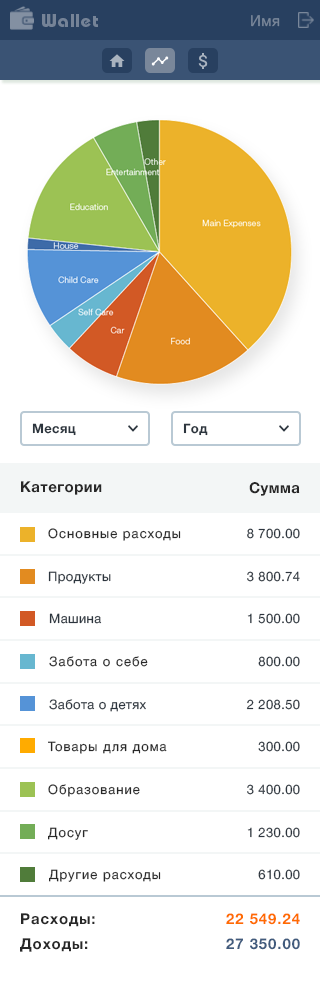
<style>
.page{position:relative;width:320px;height:986px;background:#ffffff}
.page>*{position:absolute;margin:0}
.t1{font:18px "BauhausC-Bold";letter-spacing:0.06em;color:#758397}
.t2{font:15px "HelveticaNeueCyr-Roman";letter-spacing:0.03em;color:#79879a}
.t3{font:13px "HelveticaNeueCyr-Bold";letter-spacing:0.03em;color:#2c353e}
.t4{font:15px "HelveticaNeueCyr-Bold";letter-spacing:0.03em;color:#282828}
.t5{font:13px "HelveticaNeueCyr-Roman";letter-spacing:0.08em;color:#282828}
.t6{font:13px "HelveticaNeueCyr-Roman";letter-spacing:0.03em;color:#2c353e}
.t7{font:15px "HelveticaNeueCyr-Bold";letter-spacing:0.06em;color:#282828}
.t8{font:15px "HelveticaNeueCyr-Bold";letter-spacing:0.06em;color:#ff6c00}
.t9{font:15px "HelveticaNeueCyr-Bold";letter-spacing:0.06em;color:#415b7d}
</style>
<div class="page">
<p class="t1" style="left:42px;top:14px;width:56px;height:13px">Wallet</p>
<p class="t2" style="left:251px;top:15px;width:29px;height:12px">Имя</p>
<p class="t3" style="left:32px;top:423px;width:44px;height:13px">Месяц</p>
<p class="t3" style="left:183px;top:423px;width:25px;height:13px">Год</p>
<p class="t4" style="left:21px;top:481px;width:81px;height:14px">Категории</p>
<p class="t4" style="left:249px;top:482px;width:51px;height:14px">Сумма</p>
<p class="t5" style="left:48px;top:528px;width:133px;height:13px">Основные расходы</p>
<p class="t6" style="left:247px;top:528px;width:53px;height:11px">8 700.00</p>
<p class="t6" style="left:48px;top:571px;width:63px;height:13px">Продукты</p>
<p class="t6" style="left:247px;top:571px;width:53px;height:11px">3 800.74</p>
<p class="t6" style="left:49px;top:613px;width:53px;height:11px">Машина</p>
<p class="t6" style="left:247px;top:613px;width:53px;height:11px">1 500.00</p>
<p class="t5" style="left:49px;top:656px;width:99px;height:11px">Забота о себе</p>
<p class="t6" style="left:258px;top:656px;width:42px;height:11px">800.00</p>
<p class="t6" style="left:49px;top:699px;width:97px;height:13px">Забота о детях</p>
<p class="t6" style="left:246px;top:699px;width:54px;height:11px">2 208.50</p>
<p class="t5" style="left:48px;top:741px;width:119px;height:13px">Товары для дома</p>
<p class="t6" style="left:258px;top:741px;width:42px;height:11px">300.00</p>
<p class="t5" style="left:48px;top:784px;width:92px;height:13px">Образование</p>
<p class="t6" style="left:247px;top:784px;width:53px;height:11px">3 400.00</p>
<p class="t5" style="left:48px;top:827px;width:40px;height:13px">Досуг</p>
<p class="t6" style="left:247px;top:827px;width:53px;height:11px">1 230.00</p>
<p class="t5" style="left:49px;top:869px;width:112px;height:13px">Другие расходы</p>
<p class="t6" style="left:258px;top:869px;width:42px;height:11px">610.00</p>
<p class="t7" style="left:21px;top:913px;width:74px;height:14px">Расходы:</p>
<p class="t8" style="left:226px;top:913px;width:74px;height:12px">22 549.24</p>
<p class="t7" style="left:20px;top:938px;width:68px;height:14px">Доходы:</p>
<p class="t9" style="left:226px;top:938px;width:74px;height:12px">27 350.00</p>
</div>
